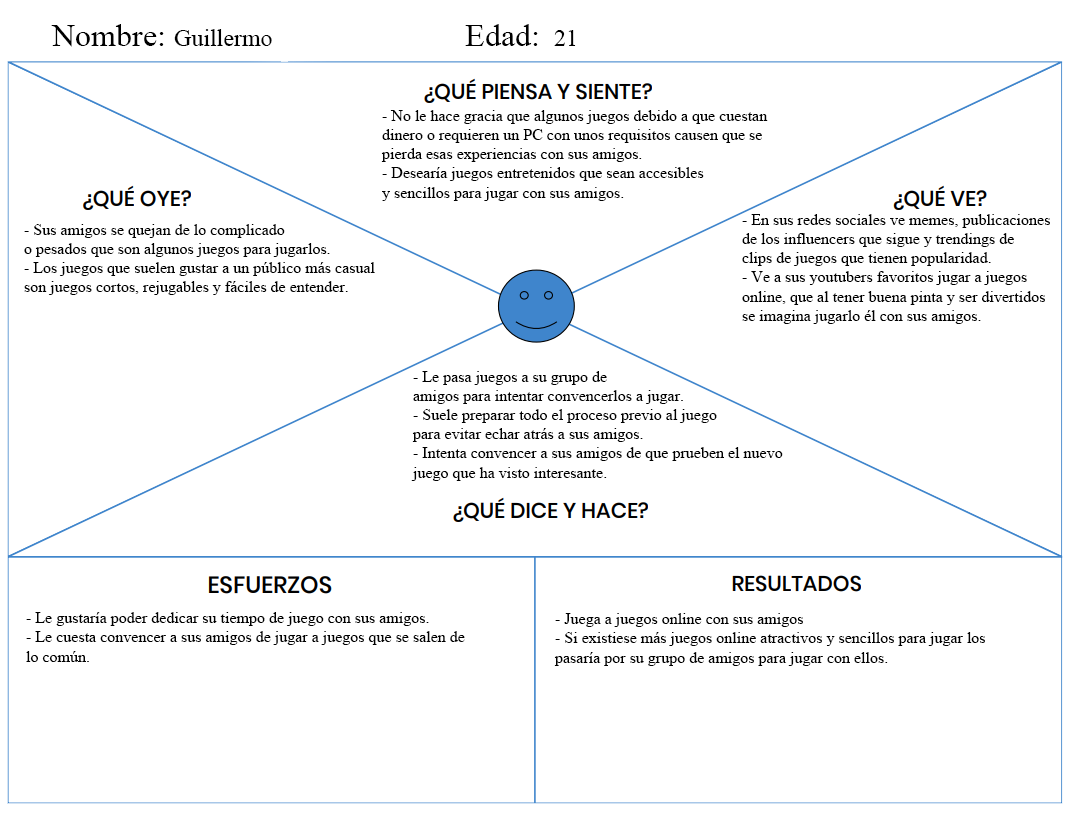
<style>
.page{position:relative;width:1074px;height:813px;background:#ffffff}
.page>*{position:absolute;margin:0}
.t1{font:32px "TimesNewRomanPSMT";color:#000000}
.t2{font:24px "TimesNewRomanPSMT";color:#000000}
.t3{font:12px "TimesNewRomanPSMT";color:#000000}
.t4{font:16px "TimesNewRomanPSMT";color:#000000}
</style>
<div class="page">
<p class="t1" style="left:51px;top:24px;width:113px;height:23px">Nombre:</p>
<p class="t2" style="left:174px;top:29px;width:98px;height:17px">Guillermo</p>
<p class="t1" style="left:465px;top:24px;width:73px;height:22px">Edad:</p>
<p class="t2" style="left:554px;top:30px;width:22px;height:16px">21</p>
<p class="t3" style="left:381px;top:110px;width:387px;height:91px">- No le hace gracia que algunos juegos debido a que cuestan <br>dinero o requieren un PC con unos requisitos causen que se <br>pierda esas experiencias con sus amigos.<br>- Desearía juegos entretenidos que sean accesibles<br>y sencillos para jugar con sus amigos.</p>
<p class="t4" style="left:742px;top:214px;width:308px;height:110px">- En sus redes sociales ve memes, publicaciones<br>de los influencers que sigue y trendings de<br>clips de juegos que tienen popularidad.<br>- Ve a sus youtubers favoritos jugar a juegos <br>online, que al tener buena pinta y ser divertidos<br>se imagina jugarlo él con sus amigos.</p>
<p class="t3" style="left:24px;top:224px;width:351px;height:71px">- Sus amigos se quejan de lo complicado<br>o pesados que son algunos juegos para jugarlos.<br>- Los juegos que suelen gustar a un público más casual<br>son juegos cortos, rejugables y fáciles de entender.</p>
<p class="t3" style="left:411px;top:371px;width:372px;height:110px">- Le pasa juegos a su grupo de <br>amigos para intentar convencerlos a jugar.<br>- Suele preparar todo el proceso previo al juego<br>para evitar echar atrás a sus amigos.<br>- Intenta convencer a sus amigos de que prueben el nuevo<br>juego que ha visto interesante.</p>
<p class="t3" style="left:26px;top:612px;width:439px;height:50px">- Le gustaría poder dedicar su tiempo de juego con sus amigos.<br>- Le cuesta convencer a sus amigos de jugar a juegos que se salen de<br>lo común.</p>
<p class="t3" style="left:554px;top:613px;width:431px;height:53px">- Juega a juegos online con sus amigos<br>- Si existiese más juegos online atractivos y sencillos para jugar los <br>pasaría por su grupo de amigos para jugar con ellos.</p>
</div>
